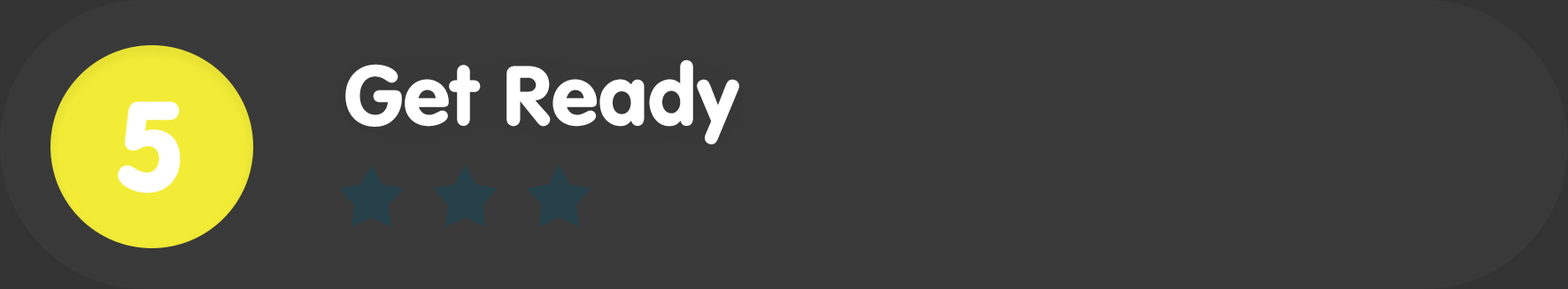
<style>
.page{position:relative;width:1568px;height:289px;background:#393939}
.page>*{position:absolute;margin:0}
.t1{font:88.5px "VAGRundschriftD";color:#ffffff}
.t2{font:132.8px "VAGRundschriftD";color:#ffffff}
</style>
<div class="page">
<p class="t1" style="left:345px;top:59px;width:394px;height:85px">Get Ready</p>
<p class="t2" style="left:118px;top:101px;width:63px;height:92px">5</p>
</div>
